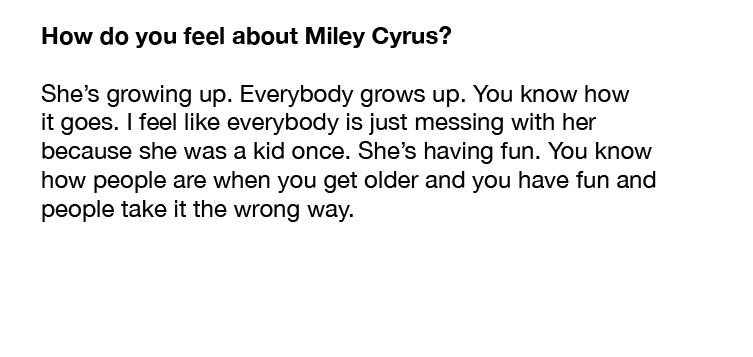
<style>
.page{position:relative;width:753px;height:357px;background:#ffffff}
.page>*{position:absolute;margin:0}
.t1{font:24px "HelveticaNeue";color:#020201}
.t2{font:24px "HelveticaNeue-Bold";color:#020201}
</style>
<div class="page">
<p class="t1" style="left:41px;top:26px;width:615px;height:196px"><span class="t2">How do you feel about Miley Cyrus?<br></span><br>She’s growing up. Everybody grows up. You know how <br>it goes. I feel like everybody is just messing with her <br>because she was a kid once. She’s having fun. You know <br>how people are when you get older and you have fun and <br>people take it the wrong way.</p>
</div>
